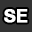
<style>
.page{position:relative;width:32px;height:32px;background:#333333}
.page>*{position:absolute;margin:0}
.t1{font:18px "HelveticaNeue-Bold";color:#ffffff;font-weight:bold}
</style>
<div class="page">
<p class="t1" style="left:4px;top:9px;width:24px;height:14px">SE</p>
</div>
